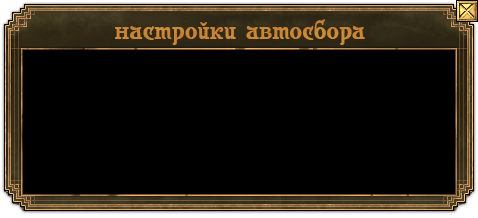
<style>
.page{position:relative;width:478px;height:218px;background:#000000}
.page>*{position:absolute;margin:0}
.t1{font:26px "Casanova";letter-spacing:0.01em;color:#c78335}
</style>
<div class="page">
<p class="t1" style="left:115px;top:19px;width:250px;height:26px">настройки автосбора</p>
</div>
